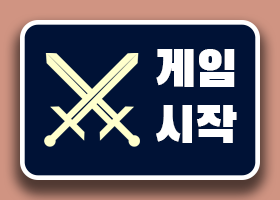
<style>
.page{position:relative;width:280px;height:200px;background:#001236}
.page>*{position:absolute;margin:0}
.t1{font:12px/55.7px "BlackHanSans-Regular";color:#ffffff}
</style>
<div class="page">
<p class="t1" style="left:156px;top:49px;width:81px;height:94px">게임<br>시작</p>
</div>
